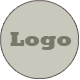
<style>
.page{position:relative;width:80px;height:80px;background:#c9c8bc}
.page>*{position:absolute;margin:0}
.t1{font:20.8px "Rockwell-ExtraBold";color:#7a7869}
</style>
<div class="page">
<p class="t1" style="left:10px;top:32px;width:62px;height:18px">Logo</p>
</div>
